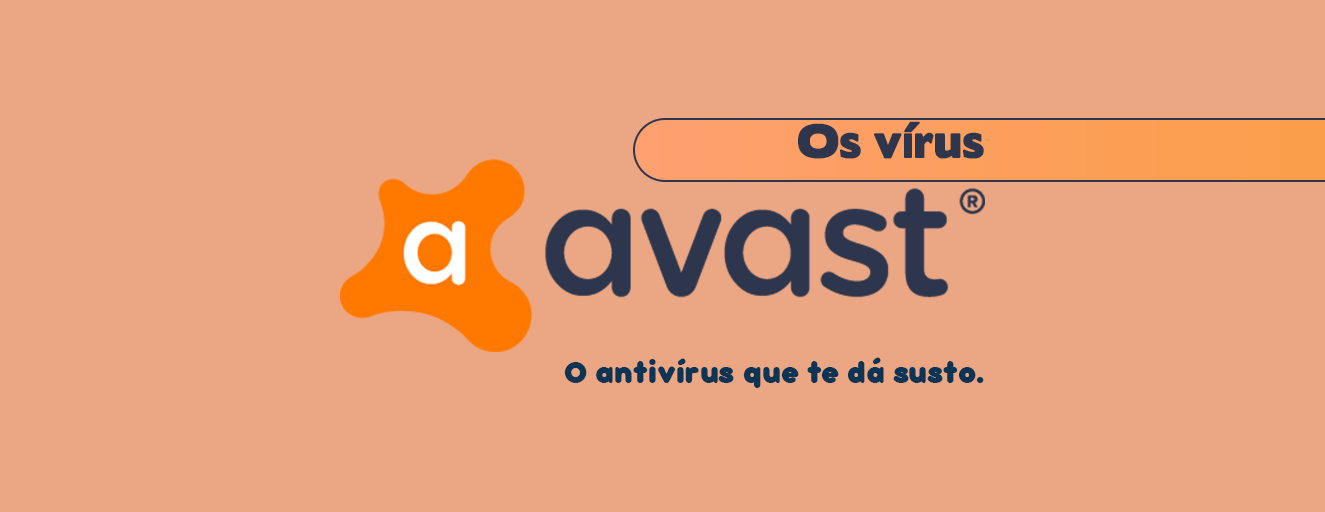
<style>
.page{position:relative;width:1325px;height:512px;background:#eba784}
.page>*{position:absolute;margin:0}
.t1{font:43.1px "BorisBlackBloxx";color:#2d364c}
.t2{font:34.4px "bubbleboddy-Fat";color:#0c3555}
</style>
<div class="page">
<p class="t1" style="left:798px;top:121px;width:186px;height:38px">Os vírus</p>
<p class="t2" style="left:564px;top:357px;width:420px;height:31px">O antivírus que te dá susto.</p>
</div>
